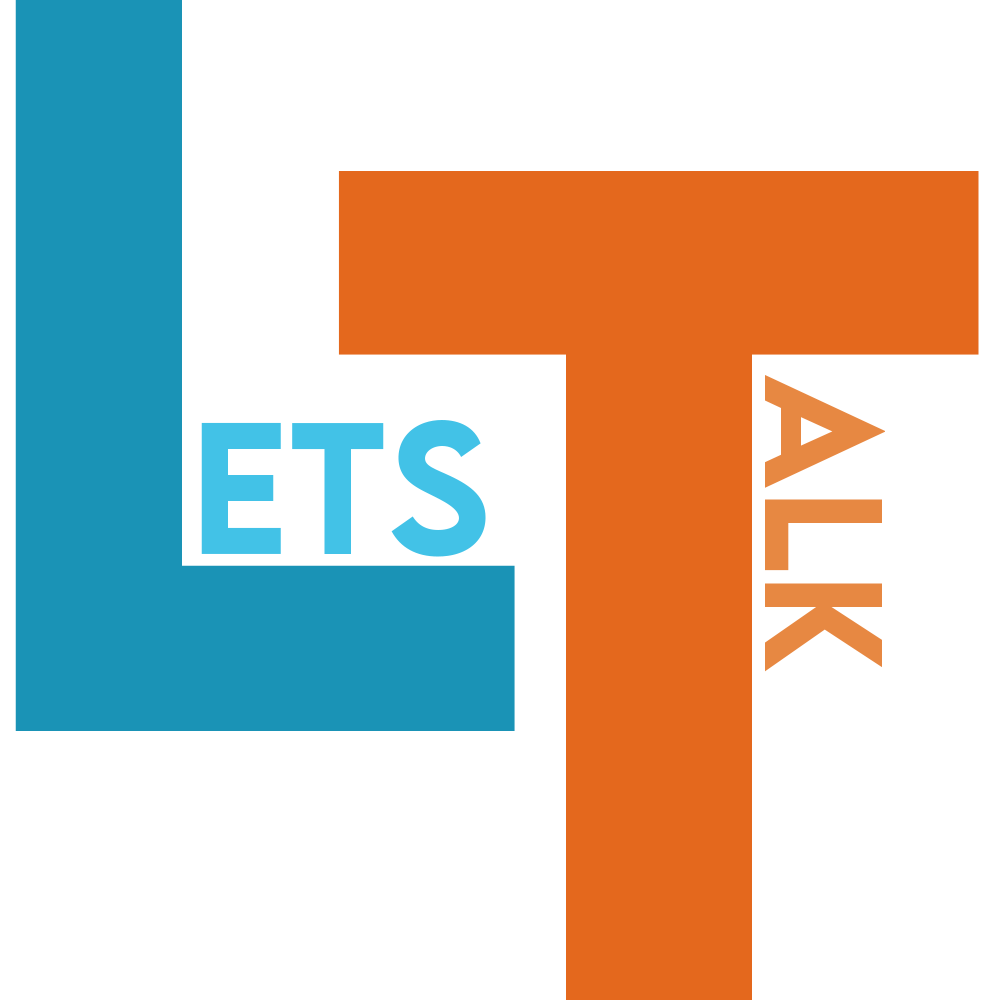
<style>
.page{position:relative;width:1000px;height:1000px;background:#ffffff}
.page>*{position:absolute;margin:0}
.t1{font:148.9px "LEMONMILK-Medium";color:#e78842}
.t2{font:166.6px "LEMONMILK-Medium";color:#42c2e7}
</style>
<div class="page">
<p class="t1" style="left:765px;top:375px;width:120px;height:297px;rotate:90deg">alk</p>
<p class="t2" style="left:201px;top:420px;width:285px;height:137px">ets</p>
</div>
